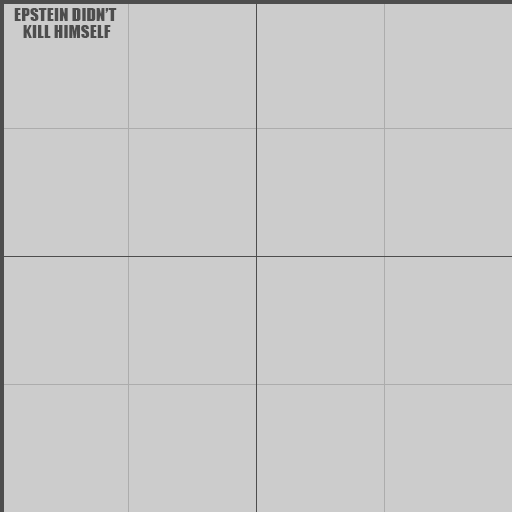
<style>
.page{position:relative;width:512px;height:512px;background:#cccccc}
.page>*{position:absolute;margin:0}
.t1{font:16.7px/16.7px "Impact";letter-spacing:0.02em;color:#4d4d4d;text-transform:uppercase}
</style>
<div class="page">
<p class="t1" style="left:14px;top:8px;width:103px;height:30px;text-align:center">Epstein Didn’t <br>Kill Himself</p>
</div>
